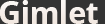
<style>
.page{position:relative;width:105px;height:24px;background:#333333}
.page>*{position:absolute;margin:0}
.t1{font:31.5px "DroidSans-Bold";letter-spacing:-0.015em;color:#f5eee9}
</style>
<div class="page">
<p class="t1" style="left:0px;top:0px;width:98px;height:24px">Gimlet</p>
</div>
